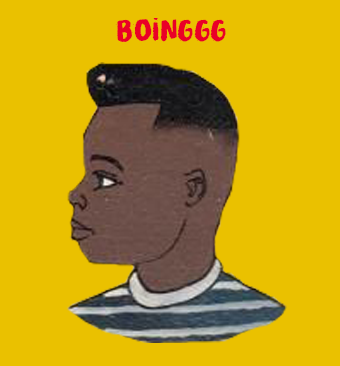
<style>
.page{position:relative;width:340px;height:366px;background:#eac100}
.page>*{position:absolute;margin:0}
.t1{font:48px "TropicalAsianDEMO-Regular";color:#ea0027}
</style>
<div class="page">
<p class="t1" style="left:115px;top:18px;width:111px;height:24px">BOINGgg</p>
</div>
